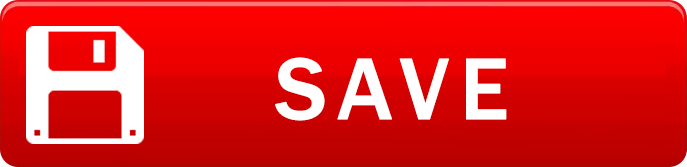
<style>
.page{position:relative;width:687px;height:167px}
.page>*{position:absolute;margin:0}
.t1{font:90px "FranklinGothic-Medium";letter-spacing:0.1em;color:#ffffff;font-weight:bold}
</style>
<div class="page">
<p class="t1" style="left:275px;top:57px;width:232px;height:64px">SAVE</p>
</div>
